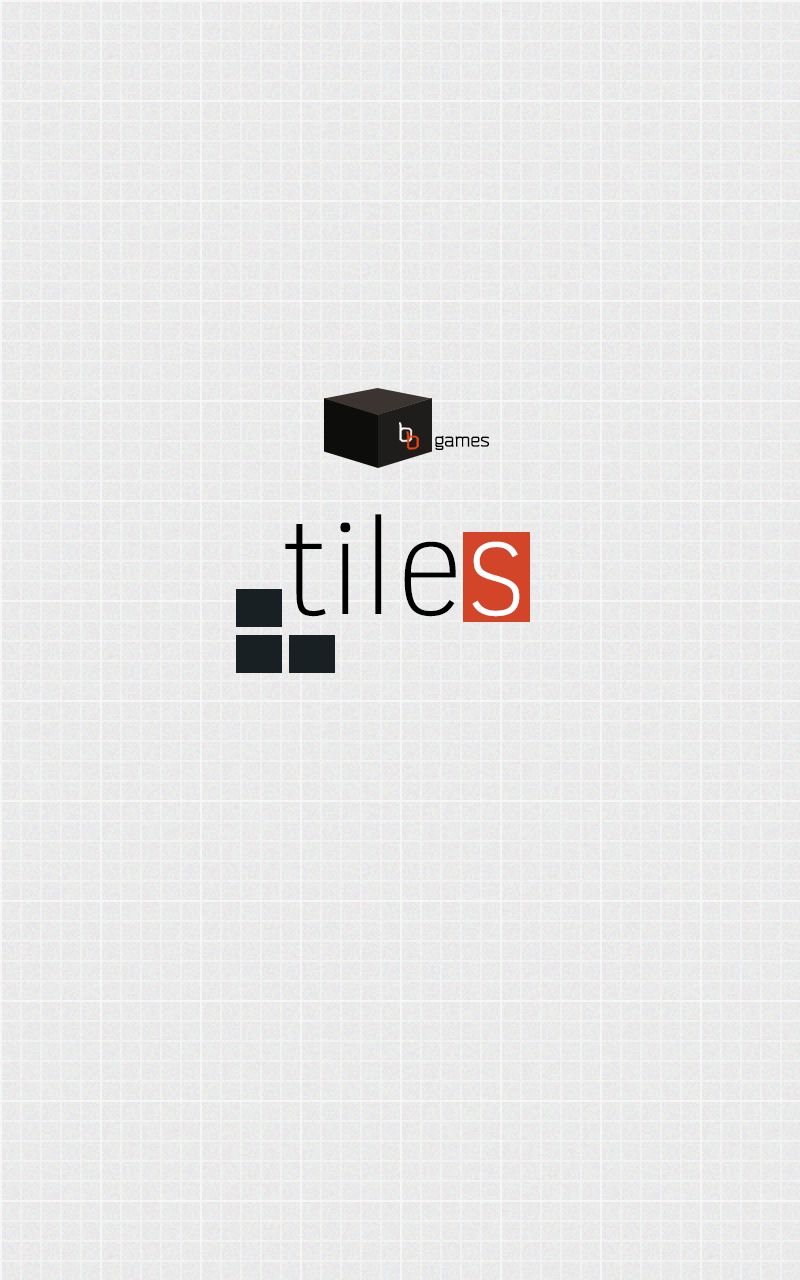
<style>
.page{position:relative;width:800px;height:1280px}
.page>*{position:absolute;margin:0}
.t1{font:19px "Bender";color:#000000}
.t2{font:137px "ClearSans-Thin";color:#000000}
.t3{font:137px "ClearSans-Thin";color:#ffffff}
</style>
<div class="page">
<p class="t1" style="left:435px;top:436px;width:54px;height:14px">games</p>
<p class="t2" style="left:285px;top:514px;width:235px;height:103px">tile<span class="t3">s</span></p>
</div>
